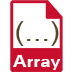
<style>
.page{position:relative;width:72px;height:72px;background:#ffffff}
.page>*{position:absolute;margin:0}
.t1{font:27px "ArialMT";color:#524727;scale:1.11 1}
.t2{font:17.1px "Univers-Bold";color:#ffffff;scale:1.11 1}
</style>
<div class="page">
<p class="t1" style="left:16px;top:21px;width:43px;height:25px">(...)</p>
<p class="t2" style="left:13px;top:55px;width:48px;height:15px">Array</p>
</div>
